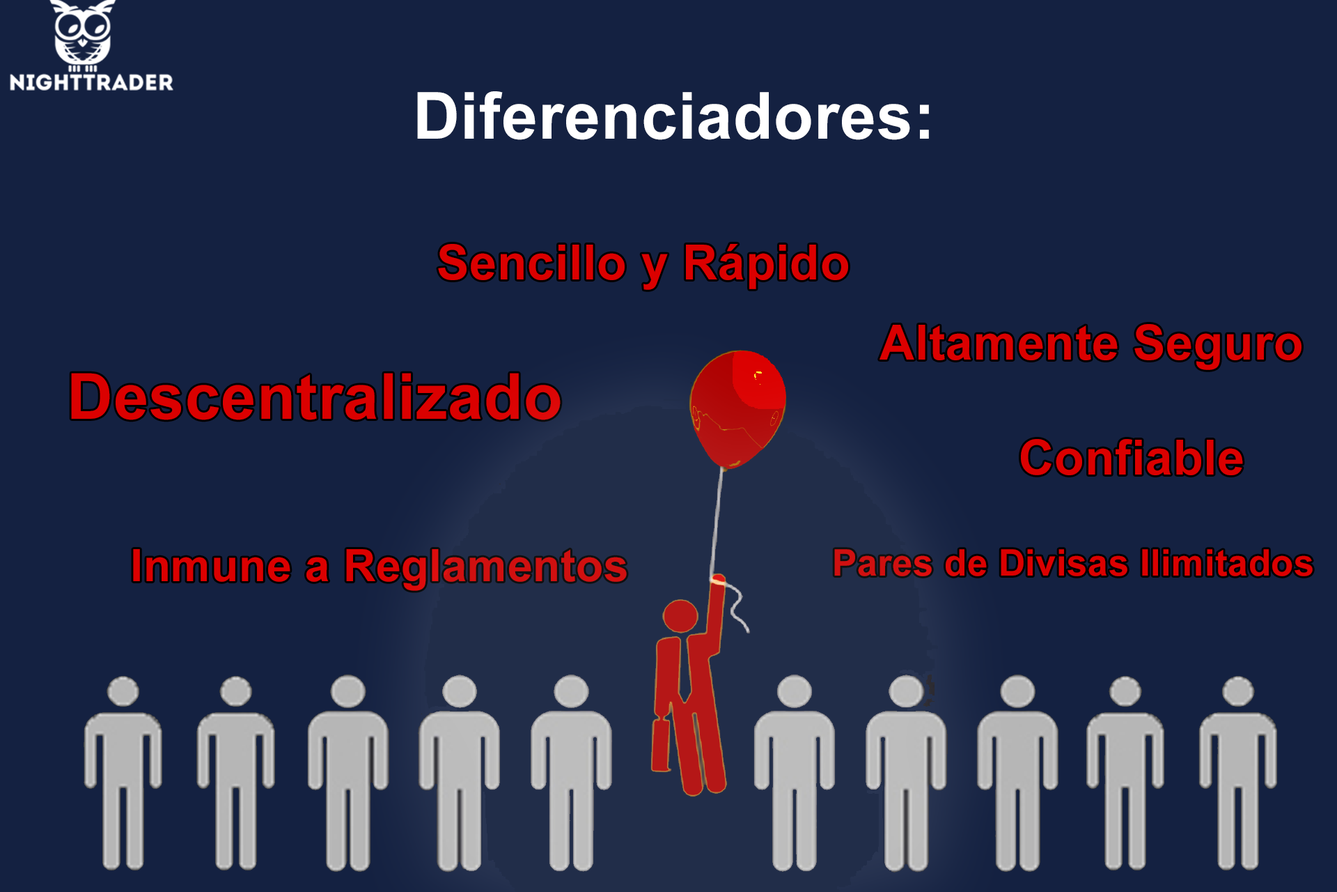
<style>
.page{position:relative;width:1337px;height:892px;background:#142141}
.page>*{position:absolute;margin:0}
.t1{font:65px "Arial-BoldMT";letter-spacing:0.01em;color:#ffffff}
.t2{font:48.7px "Arial-BoldMT";letter-spacing:0.01em;color:#db0000}
.t3{font:63.4px "Arial-BoldMT";letter-spacing:0.01em;color:#db0000}
.t4{font:44.8px "Arial-BoldMT";letter-spacing:0.01em;color:#db0000}
.t5{font:36.7px "Arial-BoldMT";letter-spacing:0.01em;color:#db0000}
</style>
<div class="page">
<p class="t1" style="left:417px;top:91px;width:512px;height:49px">Diferenciadores:</p>
<p class="t2" style="left:438px;top:244px;width:410px;height:46px">Sencillo y Rápido</p>
<p class="t2" style="left:880px;top:324px;width:422px;height:46px">Altamente Seguro</p>
<p class="t3" style="left:71px;top:373px;width:490px;height:47px">Descentralizado</p>
<p class="t2" style="left:1021px;top:439px;width:222px;height:36px">Confiable</p>
<p class="t4" style="left:133px;top:549px;width:494px;height:42px">Inmune a Reglamentos</p>
<p class="t5" style="left:834px;top:549px;width:479px;height:27px">Pares de Divisas Ilimitados</p>
</div>
